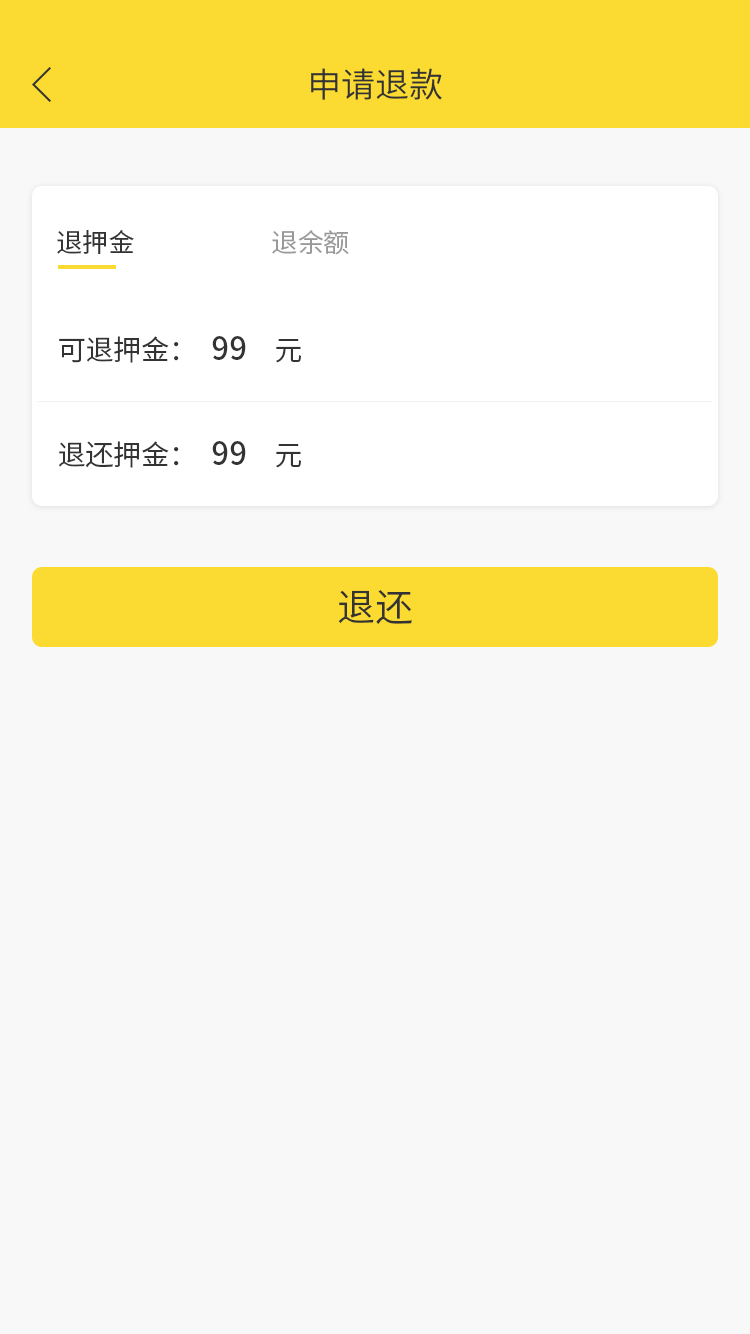
<style>
.page{position:relative;width:750px;height:1334px;background:#f8f8f8}
.page>*{position:absolute;margin:0}
.t1{font:34px "SourceHanSansSC-Normal";color:#333333}
.t2{font:26px "SourceHanSansSC-Regular";color:#333333}
.t3{font:26px "SourceHanSansSC-Regular";color:#999999}
.t4{font:28px "SourceHanSansSC-Normal";color:#333333}
.t5{font:32px "SourceHanSansSC-Medium";color:#333333}
.t6{font:38px "SourceHanSansSC-Normal";color:#333333}
</style>
<div class="page">
<p class="t1" style="left:311px;top:68px;width:131px;height:32px">申请退款</p>
<p class="t2" style="left:57px;top:230px;width:77px;height:24px">退押金</p>
<p class="t3" style="left:272px;top:230px;width:77px;height:25px">退余额</p>
<p class="t4" style="left:59px;top:336px;width:242px;height:27px">可退押金：  <span class="t5">99    </span>元</p>
<p class="t4" style="left:59px;top:441px;width:242px;height:27px">退还押金：  <span class="t5">99    </span>元</p>
<p class="t6" style="left:338px;top:590px;width:74px;height:34px">退还</p>
</div>
